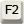
<style>
.page{position:relative;width:24px;height:24px}
.page>*{position:absolute;margin:0}
.t1{font:12px "ArialMT";letter-spacing:-0.025em;color:#000000}
</style>
<div class="page">
<p class="t1" style="left:5px;top:5px;width:14px;height:9px">F2</p>
</div>
